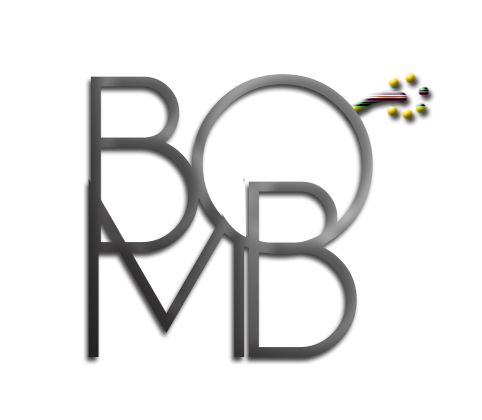
<style>
.page{position:relative;width:482px;height:420px;background:#ffffff}
.page>*{position:absolute;margin:0}
.t1{font:254px/105px "Champagne&Limousines";letter-spacing:-0.08em}
</style>
<div class="page">
<p class="t1" style="left:88px;top:74px;width:285px;height:283px">BO<br>MB</p>
</div>
